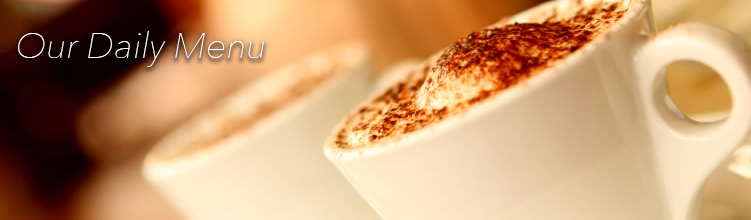
<style>
.page{position:relative;width:751px;height:220px}
.page>*{position:absolute;margin:0}
.t1{font:36px "AvenirNext-UltraLightItalic";color:#ffffff}
</style>
<div class="page">
<p class="t1" style="left:18px;top:31px;width:246px;height:36px">Our Daily Menu</p>
</div>
